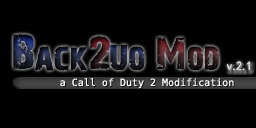
<style>
.page{position:relative;width:256px;height:128px;background:#000000}
.page>*{position:absolute;margin:0}
.t1{font:12px "ft67";color:#d9d9d9}
.t2{font:10px "BitstreamVeraSansMono-Roman";color:#ffffff}
</style>
<div class="page">
<p class="t1" style="left:226px;top:61px;width:24px;height:10px">v.2.1</p>
<p class="t2" style="left:60px;top:78px;width:174px;height:11px">a Call of Duty 2 Modification</p>
</div>
